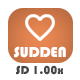
<style>
.page{position:relative;width:80px;height:80px;background:#ffffff}
.page>*{position:absolute;margin:0}
.t1{font:15px "Bauhaus93";color:#ffffff}
.t2{font:12px "Bauhaus93";color:#464646}
</style>
<div class="page">
<p class="t1" style="left:14px;top:46px;width:52px;height:12px">SUDDEN</p>
<p class="t2" style="left:16px;top:65px;width:47px;height:10px">SD 1.00x</p>
</div>
